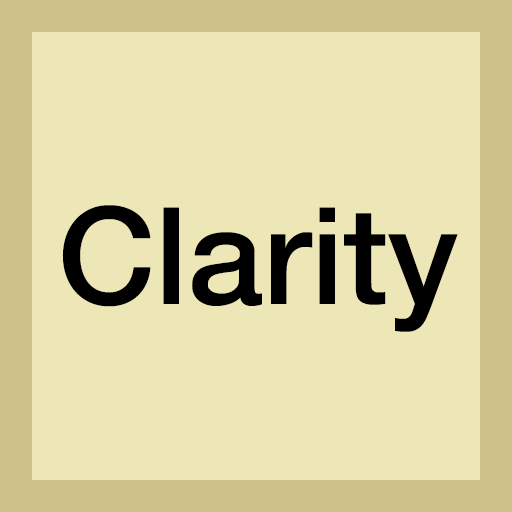
<style>
.page{position:relative;width:512px;height:512px;background:#ede7b8}
.page>*{position:absolute;margin:0}
.t1{font:135px "HelveticaNeue-Medium";color:#000000}
</style>
<div class="page">
<p class="t1" style="left:62px;top:205px;width:396px;height:127px">Clarity</p>
</div>
